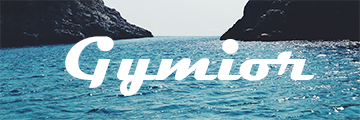
<style>
.page{position:relative;width:360px;height:120px}
.page>*{position:absolute;margin:0}
.t1{font:63.2px "Magneto-Bold";color:#ffffff}
</style>
<div class="page">
<p class="t1" style="left:65px;top:36px;width:249px;height:60px">Gymior</p>
</div>
